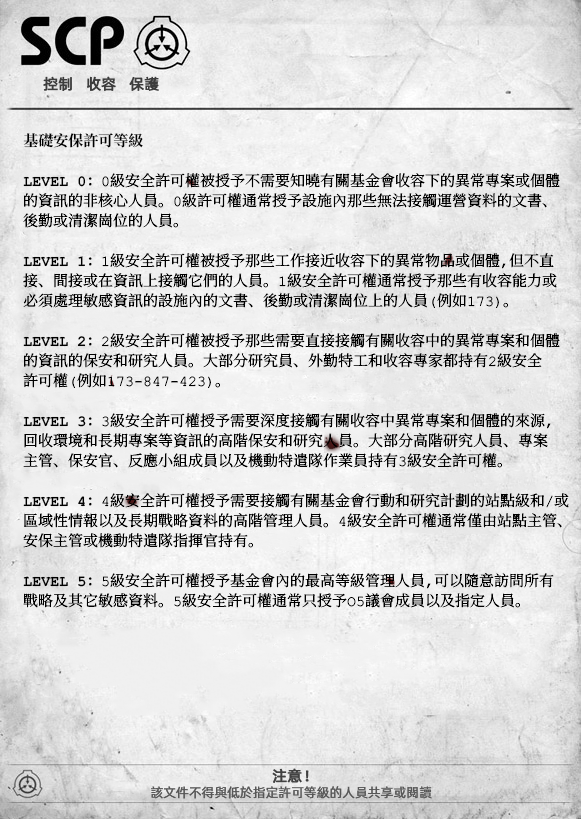
<style>
.page{position:relative;width:581px;height:819px}
.page>*{position:absolute;margin:0}
.t1{font:15px "AlibabaPuHuiTiR";color:#3d3d3d;font-weight:bold}
.t2{font:15px/20px "ContainmentBreach-Regular";color:#000000}
.t3{font:15px/20px "ContainmentBreach-Bold";color:#000000}
.t4{font:15px "AlibabaPuHuiTiR";color:#414141;font-weight:bold}
.t5{font:13px "AlibabaPuHuiTiR";color:#575757}
</style>
<div class="page">
<p class="t1" style="left:43px;top:76px;width:116px;height:15px">控制   收容   保護</p>
<p class="t2" style="left:23px;top:133px;width:546px;height:475px"><span class="t3">基礎安保許可等級<br><br>LEVEL 0：</span>0級安全許可權被授予不需要知曉有關基金會收容下的異常專案或個體<br>的資訊的非核心人員。0級許可權通常授予設施內那些無法接觸運營資料的文書、<br>後勤或清潔崗位的人員。<br><br><span class="t3">LEVEL 1：</span>1級安全許可權被授予那些工作接近收容下的異常物品或個體，但不直<br>接、間接或在資訊上接觸它們的人員。1級安全許可權通常授予那些有收容能力或<br>必須處理敏感資訊的設施內的文書、後勤或清潔崗位上的人員（例如173）。<br><br><span class="t3">LEVEL 2：</span>2級安全許可權被授予那些需要直接接觸有關收容中的異常專案和個體<br>的資訊的保安和研究人員。大部分研究員、外勤特工和收容專家都持有2級安全<br>許可權（例如173-847-423）。<br><br><span class="t3">LEVEL 3：</span>3級安全許可權授予需要深度接觸有關收容中異常專案和個體的來源，<br>回收環境和長期專案等資訊的高階保安和研究人員。大部分高階研究人員、專案<br>主管、保安官、反應小組成員以及機動特遣隊作業員持有3級安全許可權。<br><br><span class="t3">LEVEL 4：</span>4級安全許可權授予需要接觸有關基金會行動和研究計劃的站點級和/或<br>區域性情報以及長期戰略資料的高階管理人員。4級安全許可權通常僅由站點主管、<br>安保主管或機動特遣隊指揮官持有。<br><br><span class="t3">LEVEL 5：</span>5級安全許可權授予基金會內的最高等級管理人員，可以隨意訪問所有<br>戰略及其它敏感資料。5級安全許可權通常只授予O5議會成員以及指定人員。</p>
<p class="t4" style="left:272px;top:768px;width:37px;height:15px">注意！</p>
<p class="t5" style="left:151px;top:786px;width:281px;height:13px">該文件不得與低於指定許可等級的人員共享或閱讀</p>
</div>
